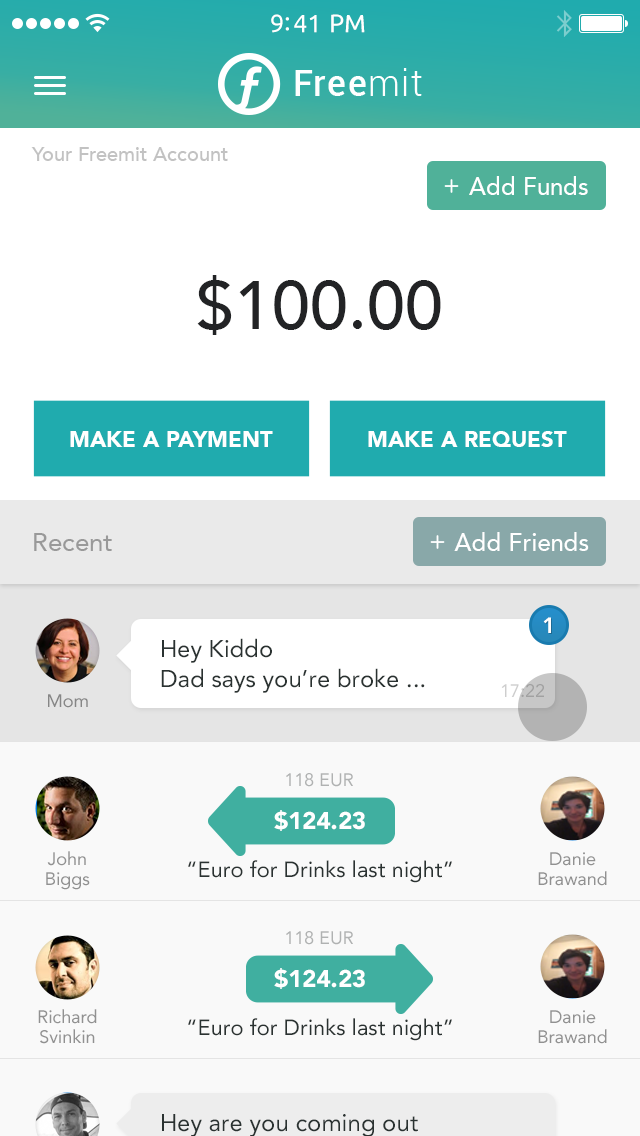
<style>
.page{position:relative;width:640px;height:1136px;background:#ffffff}
.page>*{position:absolute;margin:0}
.t1{font:25px "Ubuntu";color:#ffffff}
.t2{font:20px "Avenir-Medium";color:#c2c2c2}
.t3{font:24px "Avenir-Medium";color:#ffffff}
.t4{font:68px "Avenir-Medium";color:#222325}
.t5{font:22px "Avenir-Black";color:#ffffff;text-transform:uppercase}
.t6{font:26px "Avenir-Roman";color:#999999}
.t7{font:22px "Avenir-Heavy";color:#ffffff}
.t8{font:24px/30px "Avenir-Roman";color:#2a3231}
.t9{font:18px "Avenir-Roman"}
.t10{font:18px "Avenir-Roman";color:#868686}
.t11{font:18px "Avenir-Roman";color:#b0b2b2}
.t12{font:24px "Avenir-Black";color:#ffffff}
.t13{font:18px/20px "Avenir-Roman";color:#919191}
.t14{font:22px "Avenir-Roman";color:#2a3231}
</style>
<div class="page">
<p class="t1" style="left:271px;top:14px;width:94px;height:19px">9:41 PM</p>
<p class="t2" style="left:31px;top:147px;width:197px;height:14px">Your Freemit Account</p>
<p class="t3" style="left:469px;top:176px;width:119px;height:19px">Add Funds</p>
<p class="t4" style="left:197px;top:275px;width:244px;height:60px">$100.00</p>
<p class="t5" style="left:70px;top:431px;width:203px;height:16px">Make a Payment</p>
<p class="t5" style="left:368px;top:431px;width:199px;height:16px">Make a request</p>
<p class="t6" style="left:34px;top:533px;width:78px;height:18px">Recent</p>
<p class="t3" style="left:454px;top:532px;width:135px;height:19px">Add Friends</p>
<p class="t7" style="left:543px;top:617px;width:8px;height:16px">1</p>
<p class="t7" style="left:543px;top:617px;width:8px;height:16px">1</p>
<p class="t8" style="left:161px;top:638px;width:264px;height:55px">Hey Kiddo<br>Dad says you’re broke ...</p>
<p class="t8" style="left:161px;top:638px;width:264px;height:55px">Hey Kiddo<br>Dad says you’re broke ...</p>
<p class="t9" style="left:501px;top:684px;width:43px;height:13px">17:22</p>
<p class="t9" style="left:501px;top:684px;width:43px;height:13px">17:22</p>
<p class="t10" style="left:48px;top:694px;width:40px;height:14px">Mom</p>
<p class="t10" style="left:48px;top:694px;width:40px;height:14px">Mom</p>
<p class="t11" style="left:286px;top:773px;width:67px;height:14px">118 EUR</p>
<p class="t12" style="left:274px;top:810px;width:91px;height:21px">$124.23</p>
<p class="t13" style="left:46px;top:851px;width:44px;height:39px;text-align:center">John Biggs</p>
<p class="t13" style="left:538px;top:852px;width:69px;height:34px;text-align:center">Danie Brawand</p>
<p class="t14" style="left:188px;top:860px;width:264px;height:23px">“Euro for Drinks last night”</p>
<p class="t11" style="left:286px;top:931px;width:67px;height:14px">118 EUR</p>
<p class="t12" style="left:274px;top:968px;width:91px;height:21px">$124.23</p>
<p class="t13" style="left:38px;top:1009px;width:59px;height:35px;text-align:center">Richard Svinkin</p>
<p class="t13" style="left:538px;top:1010px;width:69px;height:34px;text-align:center">Danie Brawand</p>
<p class="t14" style="left:188px;top:1018px;width:264px;height:23px">“Euro for Drinks last night”</p>
</div>
